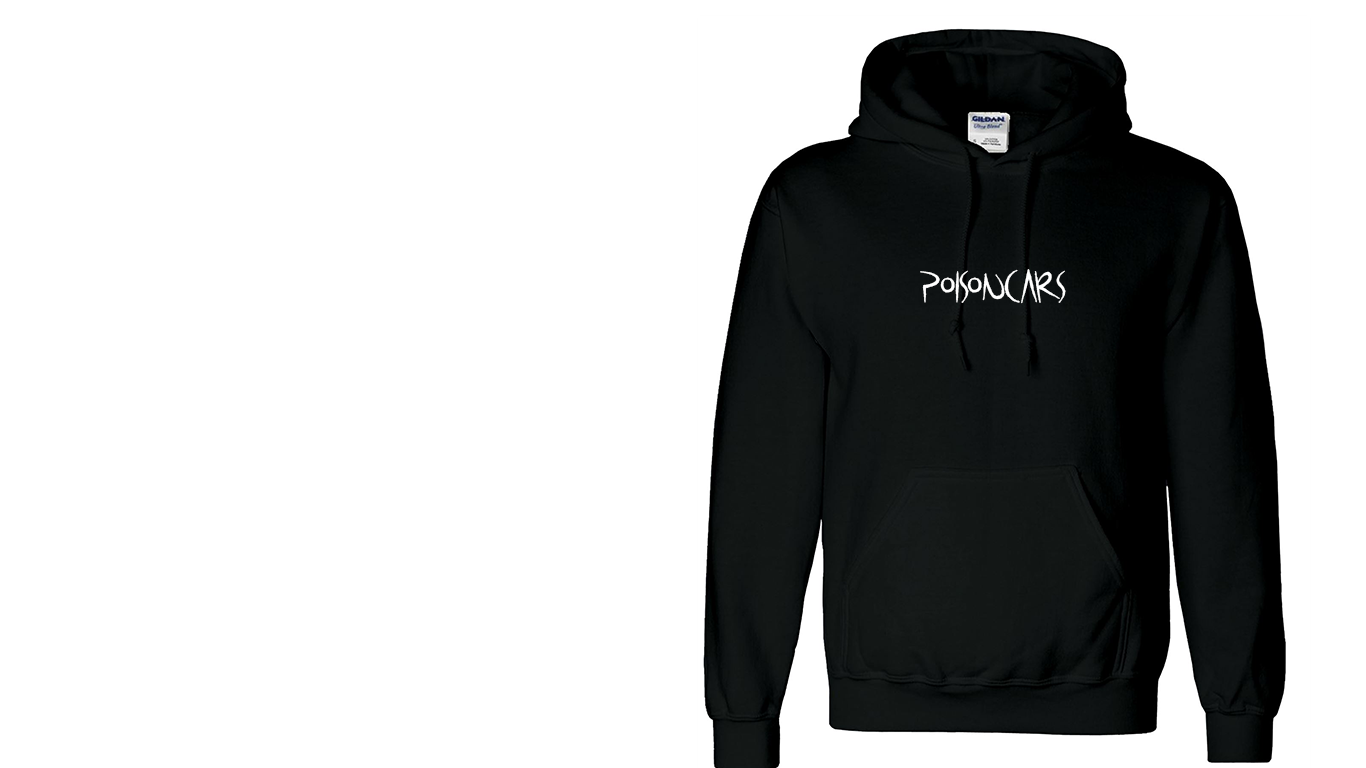
<style>
.page{position:relative;width:1366px;height:768px;background:#ffffff}
.page>*{position:absolute;margin:0}
.t1{font:50px "PoseidonAOE";color:#ffffff}
</style>
<div class="page">
<p class="t1" style="left:920px;top:269px;width:146px;height:35px">POISONCARS</p>
</div>
